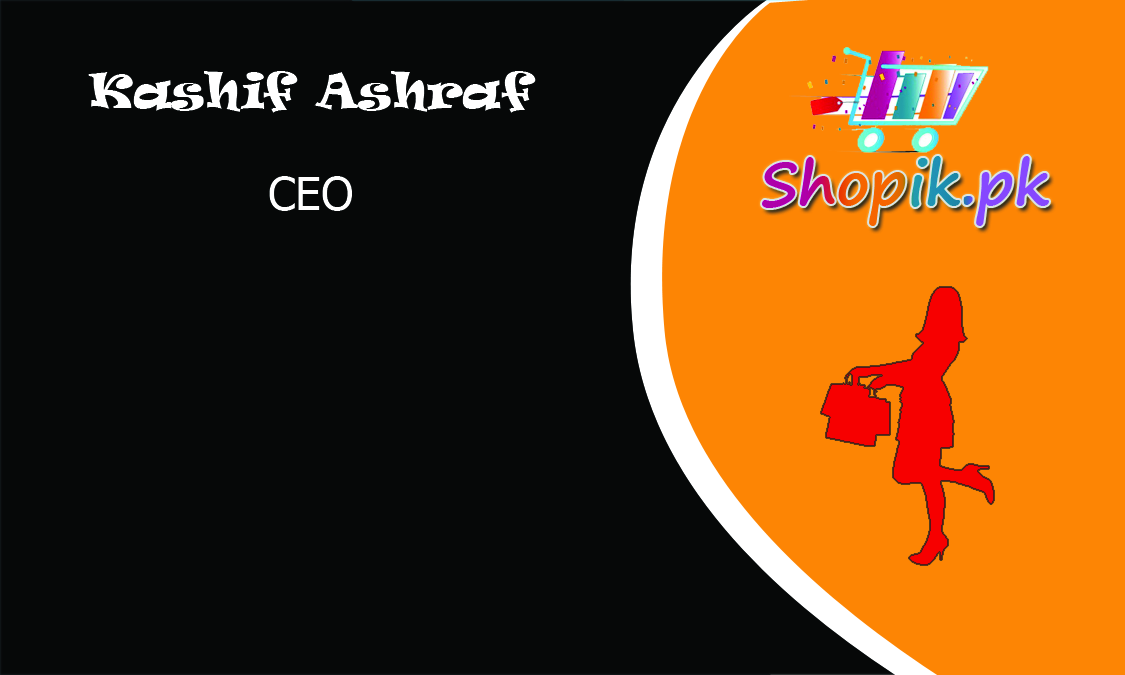
<style>
.page{position:relative;width:1125px;height:675px;background:#060808}
.page>*{position:absolute;margin:0}
.t1{font:45.8px "Ravie";color:#ffffff}
.t2{font:45.8px "Tahoma";color:#ffffff}
</style>
<div class="page">
<p class="t1" style="left:88px;top:71px;width:448px;height:42px">Kashif Ashraf</p>
<p class="t2" style="left:269px;top:176px;width:83px;height:35px">CEO</p>
</div>
